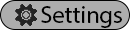
<style>
.page{position:relative;width:130px;height:30px;background:#adadad}
.page>*{position:absolute;margin:0}
.t1{font:24.1px "MyriadPro-Regular";color:#000000}
</style>
<div class="page">
<p class="t1" style="left:41px;top:6px;width:81px;height:22px">Settings</p>
</div>
